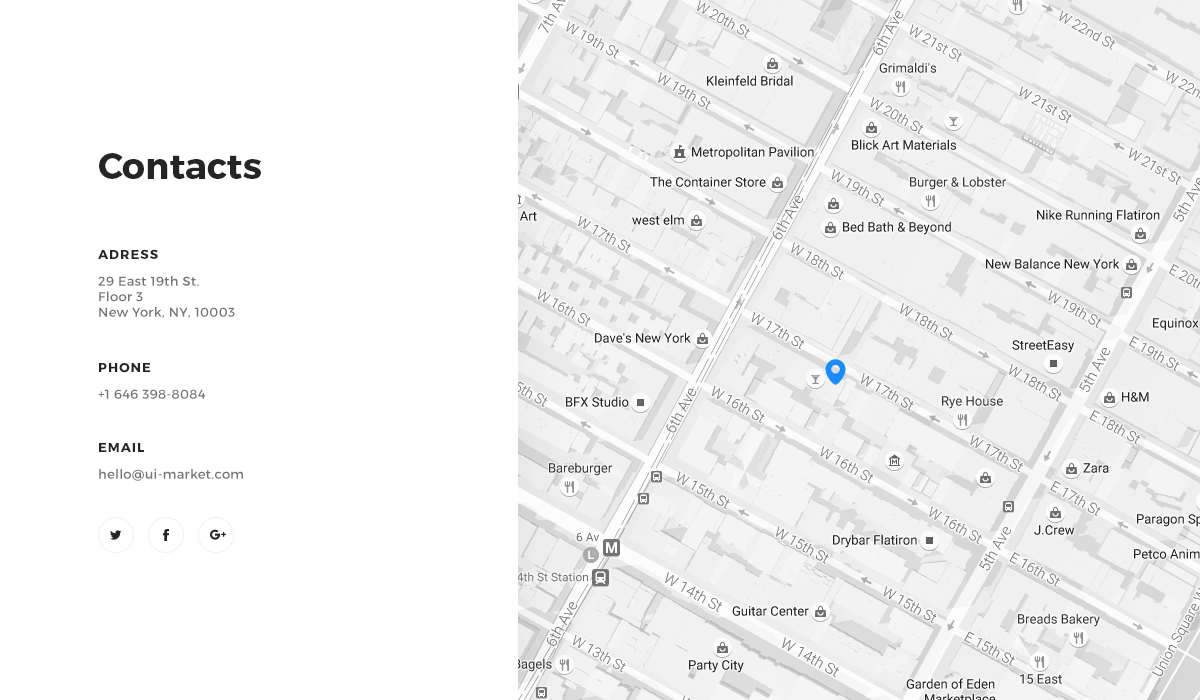
<style>
.page{position:relative;width:1200px;height:700px;background:#ffffff}
.page>*{position:absolute;margin:0}
.t1{font:36px "Montserrat-Bold";color:#242526}
.t2{font:13px "Montserrat-Bold";letter-spacing:0.08em;color:#242526;text-transform:uppercase}
.t3{font:13px "Montserrat-Regular";letter-spacing:0.025em;color:#747474}
</style>
<div class="page">
<p class="t1" style="left:99px;top:153px;width:162px;height:26px">Contacts</p>
<p class="t2" style="left:98px;top:249px;width:60px;height:10px">Adress</p>
<p class="t3" style="left:98px;top:276px;width:137px;height:42px">29 East 19th St. <br>Floor 3 <br>New York, NY, 10003</p>
<p class="t2" style="left:99px;top:363px;width:52px;height:10px">Phone</p>
<p class="t3" style="left:98px;top:389px;width:108px;height:10px">+1 646 398-8084</p>
<p class="t2" style="left:99px;top:443px;width:45px;height:9px">email</p>
<p class="t3" style="left:99px;top:469px;width:144px;height:12px">hello@ui-market.com</p>
</div>
